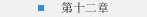
<style>
.page{position:relative;width:147px;height:17px;background:#f1f1f1}
.page>*{position:absolute;margin:0}
.t1{font:12px "SimSun"}
</style>
<div class="page">
<p class="t1" style="left:41px;top:0px;width:88px;height:17px">第十二章</p>
</div>
